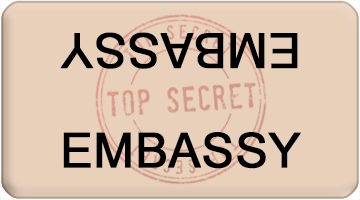
<style>
.page{position:relative;width:360px;height:200px;background:#e8d0bb}
.page>*{position:absolute;margin:0}
.t1{font:48px "ArialMT";color:#000000;font-weight:bold}
</style>
<div class="page">
<p class="t1" style="left:60px;top:32px;width:238px;height:37px;rotate:180deg">EMBASSY</p>
<p class="t1" style="left:63px;top:132px;width:238px;height:37px">EMBASSY</p>
</div>
